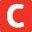
<style>
.page{position:relative;width:32px;height:32px;background:#f03226}
.page>*{position:absolute;margin:0}
.t1{font:32.3px "PTSans-Bold";letter-spacing:0.04em;color:#fefefe;font-weight:bold}
</style>
<div class="page">
<p class="t1" style="left:7px;top:4px;width:17px;height:24px">С</p>
</div>
